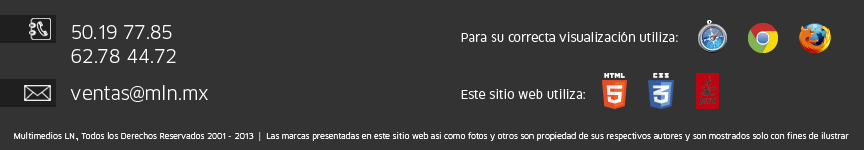
<style>
.page{position:relative;width:864px;height:150px;background:#333333}
.page>*{position:absolute;margin:0}
.t1{font:18px/24px "ClanLF-Book";color:#ffffff}
.t2{font:12px "ClanLF-Book";color:#ffffff}
.t3{font:18px "ClanLF-Book";color:#ffffff}
.t4{font:8px "ClanLF-Book";color:#ffffff}
</style>
<div class="page">
<p class="t1" style="left:71px;top:25px;width:105px;height:38px">50.19 77.85<br>62.78 44.72</p>
<p class="t2" style="left:461px;top:32px;width:217px;height:10px">Para su correcta visualización utiliza:</p>
<p class="t3" style="left:70px;top:85px;width:138px;height:17px">ventas@mln.mx</p>
<p class="t2" style="left:461px;top:89px;width:124px;height:10px">Este sitio web utiliza:</p>
<p class="t4" style="left:14px;top:132px;width:835px;height:9px">Multimedios LN., Todos los Derechos Reservados 2001 - 2013  |  Las marcas presentadas en este sitio web asi como fotos y otros son propiedad de sus respectivos autores y son mostrados solo con fines de ilustrar</p>
</div>
